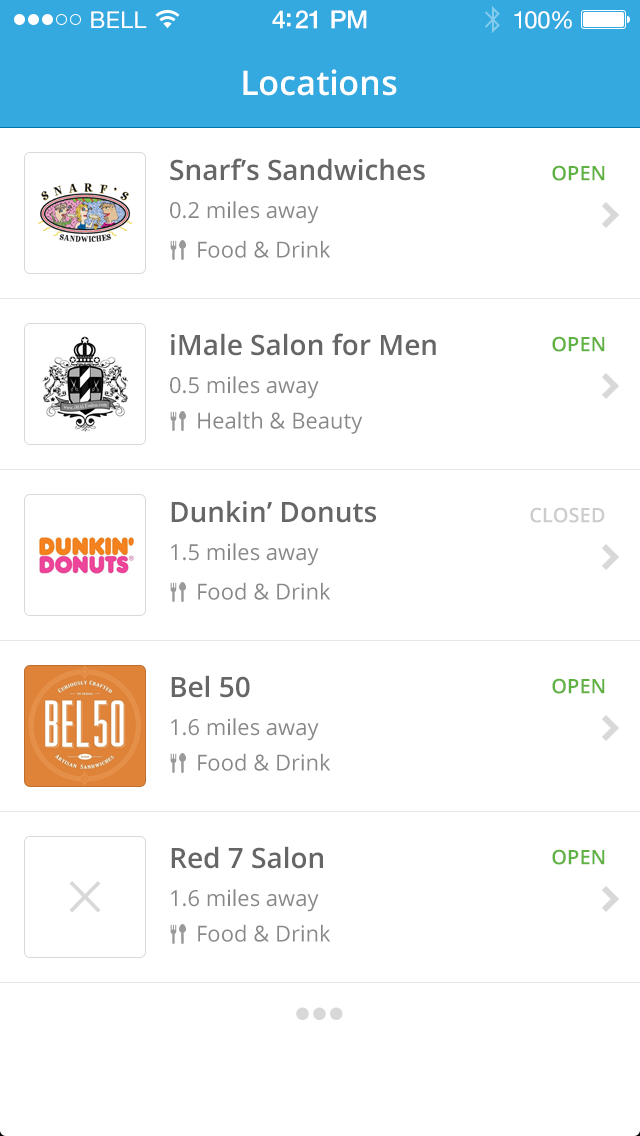
<style>
.page{position:relative;width:640px;height:1136px;background:#ffffff}
.page>*{position:absolute;margin:0}
.t1{font:23px "HelveticaNeue";letter-spacing:0.02em;color:#ffffff}
.t2{font:25px "HelveticaNeue-Medium";letter-spacing:-0.02em;color:#ffffff}
.t3{font:24px "HelveticaNeue";letter-spacing:-0.02em;color:#ffffff}
.t4{font:34px "OpenSans-Semibold";color:#ffffff}
.t5{font:28px "OpenSans-Semibold";color:#666666}
.t6{font:20px "OpenSans-Semibold";color:#5fb241}
.t7{font:22px "OpenSans";color:#888888}
.t8{font:20px "OpenSans-Semibold";color:#cccccc}
.t9{font:60px "MyriadPro-Regular";color:#d8d8d8}
</style>
<div class="page">
<p class="t1" style="left:91px;top:11px;width:56px;height:17px">BELL</p>
<p class="t2" style="left:272px;top:10px;width:95px;height:19px">4:21 PM</p>
<p class="t3" style="left:514px;top:11px;width:58px;height:18px">100%</p>
<p class="t4" style="left:243px;top:69px;width:154px;height:27px">Locations</p>
<p class="t5" style="left:170px;top:158px;width:255px;height:23px">Snarf’s Sandwiches</p>
<p class="t6" style="left:552px;top:165px;width:53px;height:16px">OPEN</p>
<p class="t7" style="left:170px;top:201px;width:149px;height:23px">0.2 miles away</p>
<p class="t7" style="left:198px;top:240px;width:133px;height:18px">Food &amp; Drink</p>
<p class="t5" style="left:171px;top:333px;width:265px;height:23px">iMale Salon for Men</p>
<p class="t6" style="left:552px;top:336px;width:53px;height:16px">OPEN</p>
<p class="t7" style="left:170px;top:376px;width:149px;height:23px">0.5 miles away</p>
<p class="t7" style="left:198px;top:411px;width:165px;height:23px">Health &amp; Beauty</p>
<p class="t5" style="left:171px;top:500px;width:205px;height:23px">Dunkin’ Donuts</p>
<p class="t8" style="left:530px;top:507px;width:75px;height:16px">CLOSED</p>
<p class="t7" style="left:171px;top:543px;width:148px;height:23px">1.5 miles away</p>
<p class="t7" style="left:198px;top:582px;width:133px;height:18px">Food &amp; Drink</p>
<p class="t5" style="left:171px;top:675px;width:79px;height:23px">Bel 50</p>
<p class="t6" style="left:552px;top:678px;width:53px;height:16px">OPEN</p>
<p class="t7" style="left:171px;top:718px;width:148px;height:23px">1.6 miles away</p>
<p class="t7" style="left:198px;top:753px;width:133px;height:18px">Food &amp; Drink</p>
<p class="t5" style="left:171px;top:846px;width:152px;height:23px">Red 7 Salon</p>
<p class="t6" style="left:552px;top:849px;width:53px;height:16px">OPEN</p>
<p class="t9" style="left:69px;top:881px;width:32px;height:32px">×</p>
<p class="t7" style="left:171px;top:889px;width:148px;height:23px">1.6 miles away</p>
<p class="t7" style="left:198px;top:924px;width:133px;height:18px">Food &amp; Drink</p>
<p class="t9" style="left:296px;top:1007px;width:47px;height:13px">•••</p>
</div>
